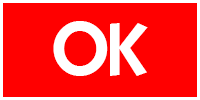
<style>
.page{position:relative;width:200px;height:100px;background:#ff0000}
.page>*{position:absolute;margin:0}
.t1{font:72px "ELEGANCE";color:#ffffff}
</style>
<div class="page">
<p class="t1" style="left:53px;top:21px;width:95px;height:55px">OK</p>
</div>
